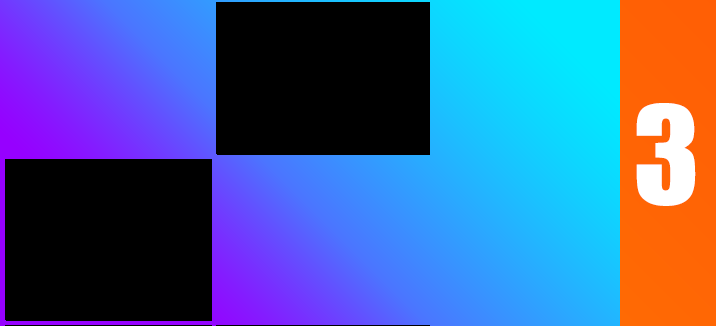
<style>
.page{position:relative;width:716px;height:326px;background:#000000}
.page>*{position:absolute;margin:0}
.t1{font:125px "Impact";color:#ffffff}
</style>
<div class="page">
<p class="t1" style="left:636px;top:103px;width:60px;height:103px">3</p>
</div>
